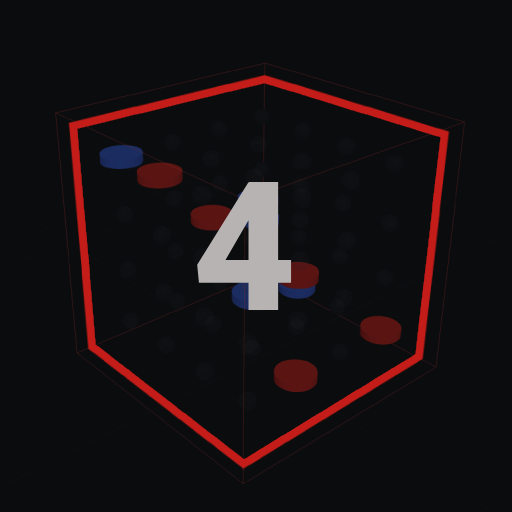
<style>
.page{position:relative;width:512px;height:512px;background:#0b0c0d}
.page>*{position:absolute;margin:0}
.t1{font:180px "Roboto-Regular_900.000wght_100.000wdth";color:#b7b3b3}
</style>
<div class="page">
<p class="t1" style="left:197px;top:182px;width:95px;height:128px">4</p>
</div>
